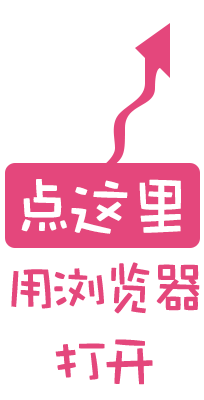
<style>
.page{position:relative;width:204px;height:400px;background:#ffffff}
.page>*{position:absolute;margin:0}
.t1{font:72px "DFWaWaSC-W5";letter-spacing:-0.2em;color:#ffffff;font-weight:bold}
.t2{font:60px/72px "DFWaWaSC-W5";letter-spacing:-0.2em;color:#e4477c;font-weight:bold}
</style>
<div class="page">
<p class="t1" style="left:21px;top:179px;width:160px;height:55px">点这里</p>
<p class="t2" style="left:11px;top:262px;width:189px;height:123px;text-align:center">用浏览器<br>打开</p>
</div>
